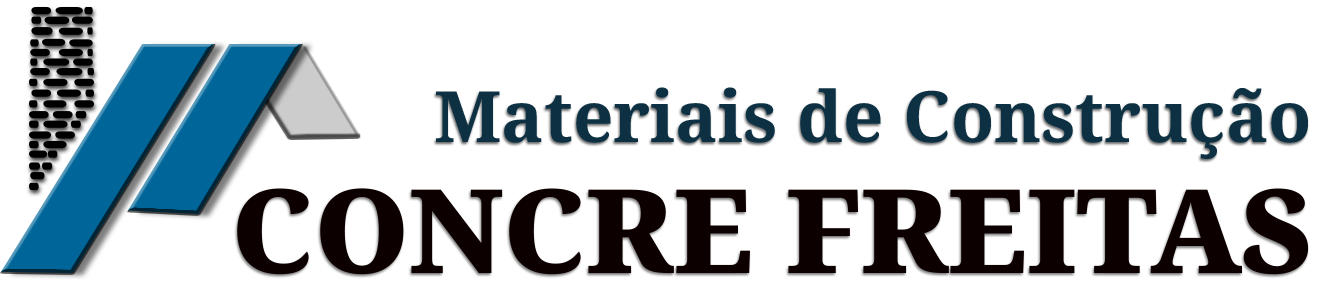
<style>
.page{position:relative;width:1333px;height:296px;background:#ffffff}
.page>*{position:absolute;margin:0}
.t1{font:70.8px "NotoSerifTelugu-Bold";color:#0d3143}
.t2{font:116.7px "NotoSerifTelugu-Black";color:#0c0100}
</style>
<div class="page">
<p class="t1" style="left:436px;top:87px;width:872px;height:72px">Materiais de Construção</p>
<p class="t2" style="left:237px;top:188px;width:1072px;height:87px">CONCRE FREITAS</p>
</div>
